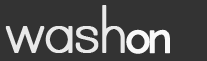
<style>
.page{position:relative;width:207px;height:61px;background:#333333}
.page>*{position:absolute;margin:0}
.t1{font:75px "PrintClearly";letter-spacing:-0.085em;color:#e9e9e9;font-weight:bold}
.t2{font:41.7px "Raleway-Medium";letter-spacing:-0.1em;color:#f9f9f9;font-weight:bold}
</style>
<div class="page">
<p class="t1" style="left:5px;top:5px;width:120px;height:48px">wash</p>
<p class="t2" style="left:126px;top:29px;width:44px;height:25px">on</p>
</div>
